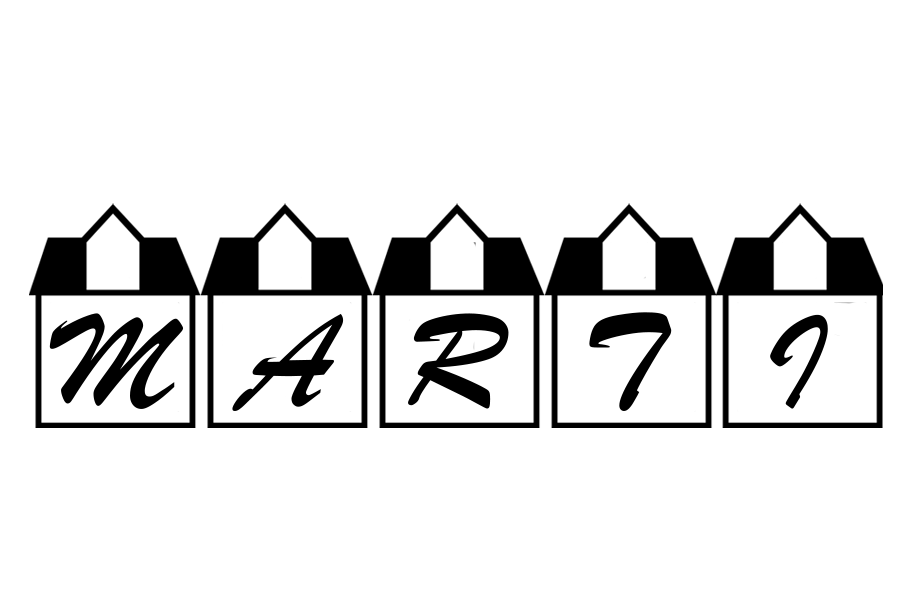
<style>
.page{position:relative;width:910px;height:607px;background:#ffffff}
.page>*{position:absolute;margin:0}
.t1{font:140px "BrushScriptMT";color:#000000}
.t2{font:140px "BrushScriptMT";letter-spacing:0.1em;color:#000000}
</style>
<div class="page">
<p class="t1" style="left:49px;top:313px;width:135px;height:96px">M</p>
<p class="t2" style="left:232px;top:313px;width:112px;height:98px">A</p>
<p class="t2" style="left:408px;top:313px;width:101px;height:96px">R</p>
<p class="t2" style="left:589px;top:312px;width:83px;height:99px">T</p>
<p class="t2" style="left:770px;top:314px;width:58px;height:95px">I</p>
</div>
